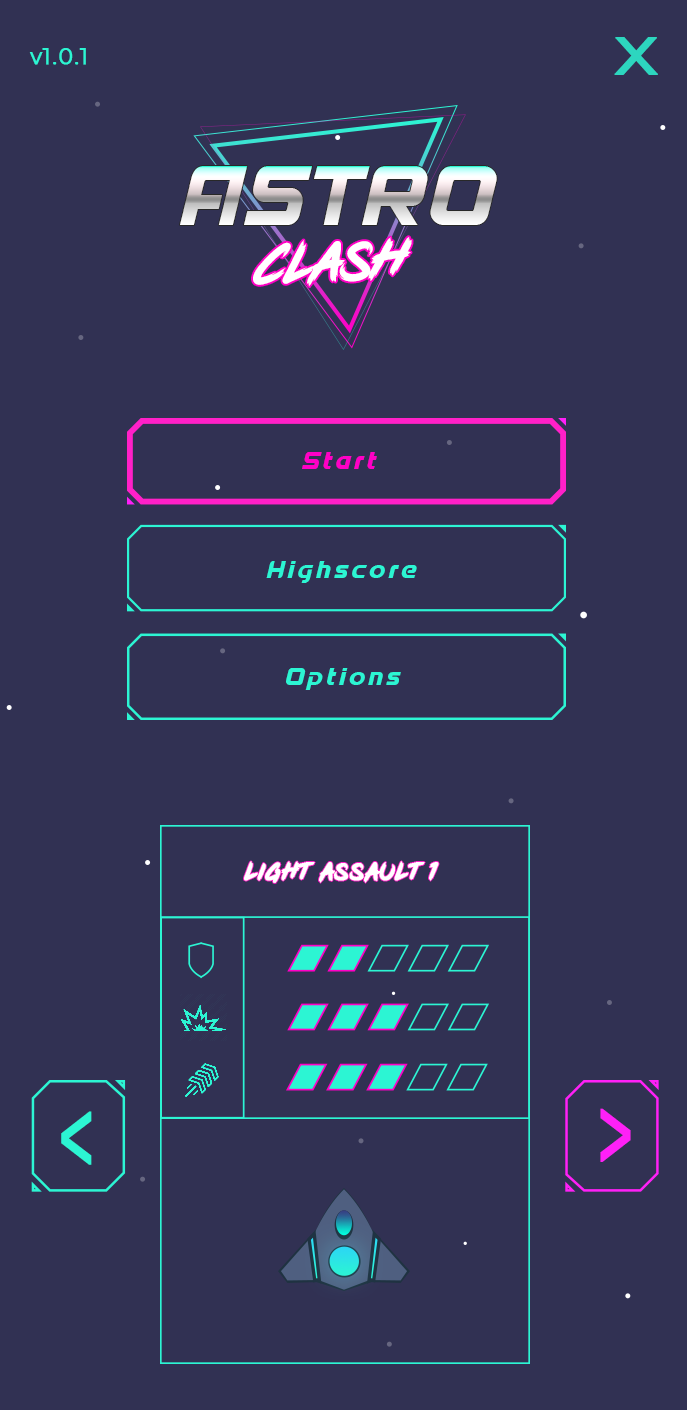
<style>
.page{position:relative;width:687px;height:1410px;background:#313153}
.page>*{position:absolute;margin:0}
.t1{font:69.3px "Montserrat-Regular";letter-spacing:0.05em;color:#2dd6bf;font-weight:bold;scale:1.2 1}
.t2{font:21.7px "Montserrat-Regular";letter-spacing:0.05em;color:#2cf5d3;font-weight:bold}
.t3{font:90.3px "Spantaran";letter-spacing:0.07em;text-transform:uppercase}
.t4{font:62.2px "PinkBlue";color:#ffffff;font-style:italic}
.t5{font:25.8px "Spantaran";letter-spacing:0.15em;color:#ff00c6}
.t6{font:25.8px "Spantaran";letter-spacing:0.15em;color:#2cf5d3}
.t7{font:26.7px "PinkBlue";letter-spacing:0.05em;color:#ffffff;font-weight:bold}
.t8{font:124.2px "Montserrat-Regular";letter-spacing:0.05em;color:#ff20f7;font-weight:bold;scale:0.52 1}
.t9{font:124.2px "Montserrat-Regular";letter-spacing:0.05em;color:#2cf5d3;font-weight:bold;scale:0.52 1}
</style>
<div class="page">
<p class="t1" style="left:614px;top:37px;width:44px;height:38px">x</p>
<p class="t2" style="left:29px;top:48px;width:57px;height:17px">v1.0.1</p>
<p class="t3" style="left:180px;top:166px;width:317px;height:59px">Astro</p>
<p class="t4" style="left:253px;top:237px;width:159px;height:50px;rotate:-2deg">Clash</p>
<p class="t5" style="left:302px;top:452px;width:75px;height:17px">Start</p>
<p class="t6" style="left:266px;top:561px;width:151px;height:22px">Highscore</p>
<p class="t6" style="left:286px;top:668px;width:115px;height:22px">Options</p>
<p class="t7" style="left:244px;top:861px;width:195px;height:22px">Light Assault 1</p>
<p class="t8" style="left:600px;top:1108px;width:31px;height:54px;rotate:180deg">&lt;</p>
<p class="t9" style="left:61px;top:1111px;width:31px;height:54px">&lt;</p>
</div>
